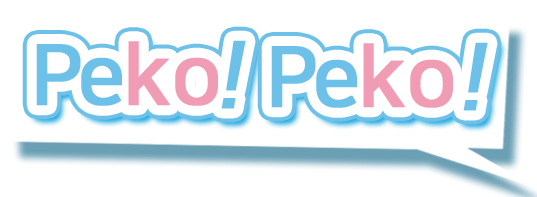
<style>
.page{position:relative;width:537px;height:197px;background:#ffffff}
.page>*{position:absolute;margin:0}
.t1{font:83.3px "NanumSquareB";color:#f09cb4;font-weight:bold}
.t2{font:83.3px "NanumSquareB";color:#6dc0e8;font-weight:bold;font-style:italic}
.t3{font:83.3px "NanumSquareB";color:#6dc0e8;font-weight:bold}
</style>
<div class="page">
<p class="t1" style="left:128px;top:41px;width:42px;height:65px">k</p>
<p class="t2" style="left:221px;top:40px;width:25px;height:69px">!</p>
<p class="t3" style="left:36px;top:44px;width:45px;height:62px">P</p>
<p class="t3" style="left:271px;top:46px;width:45px;height:62px">P</p>
<p class="t1" style="left:363px;top:43px;width:42px;height:65px">k</p>
<p class="t2" style="left:463px;top:42px;width:25px;height:69px">!</p>
<p class="t3" style="left:81px;top:57px;width:41px;height:49px">e</p>
<p class="t1" style="left:175px;top:57px;width:43px;height:49px">o</p>
<p class="t3" style="left:316px;top:59px;width:41px;height:49px">e</p>
<p class="t1" style="left:410px;top:59px;width:43px;height:49px">o</p>
</div>
